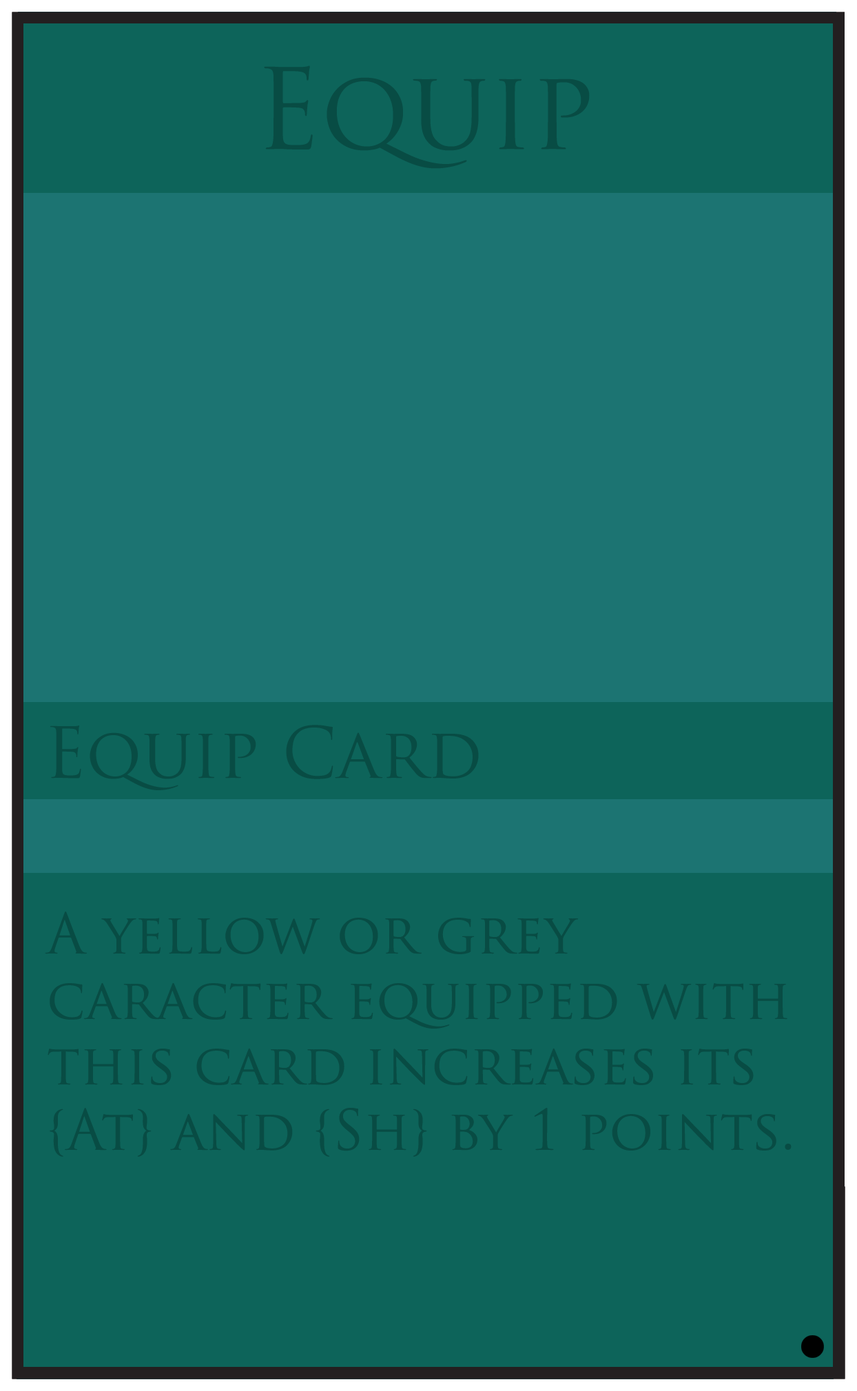
<style>
.page{position:relative;width:857px;height:1391px;background:#0d645a}
.page>*{position:absolute;margin:0}
.t1{font:109.1px "TrajanPro-Regular";color:#084c44}
.t2{font:68.9px "TrajanPro-Regular";color:#084c44}
.t3{font:54.5px "TrajanPro-Regular";color:#084c44}
</style>
<div class="page">
<p class="t1" style="left:264px;top:65px;width:326px;height:104px">Equip</p>
<p class="t2" style="left:50px;top:725px;width:429px;height:65px">Equip Card</p>
<p class="t3" style="left:45px;top:912px;width:747px;height:245px">A yellow or grey <br>caracter equipped with <br>this card increases its <br>{At} and {Sh} by 1 points.</p>
</div>
